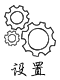
<style>
.page{position:relative;width:60px;height:80px;background:#ffffff}
.page>*{position:absolute;margin:0}
.t1{font:18px "STXingkaiSC-Light";letter-spacing:0.055em;color:#000000}
</style>
<div class="page">
<p class="t1" style="left:11px;top:61px;width:35px;height:16px">设置</p>
</div>
